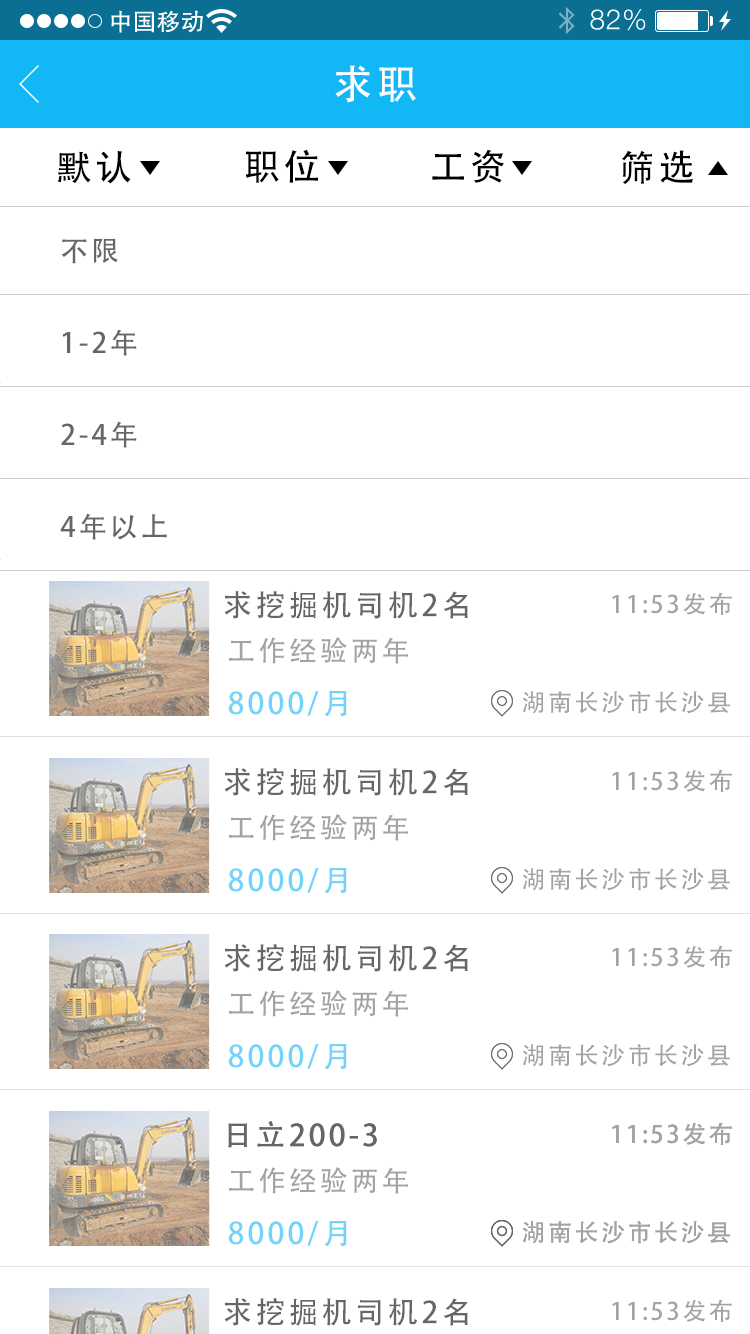
<style>
.page{position:relative;width:750px;height:1334px;background:#ffffff}
.page>*{position:absolute;margin:0}
.t1{font:40px "AdobeHeitiStd-Regular";letter-spacing:0.104em;color:#ffffff}
.t2{font:36px "AdobeHeitiStd-Regular";letter-spacing:0.104em;color:#000000}
.t3{font:28px "AdobeHeitiStd-Regular";letter-spacing:0.104em;color:#666666}
.t4{font:30px "AdobeHeitiStd-Regular";letter-spacing:0.104em;color:#666666}
.t5{font:24px "AdobeHeitiStd-Regular";letter-spacing:0.104em;color:#a3a3a3}
.t6{font:28px "AdobeHeitiStd-Regular";letter-spacing:0.104em;color:#a3a3a3}
.t7{font:30px "AdobeHeitiStd-Regular";letter-spacing:0.104em;color:#71d4fa}
</style>
<div class="page">
<p class="t1" style="left:335px;top:65px;width:81px;height:38px">求职</p>
<p class="t2" style="left:245px;top:149px;width:73px;height:34px">职位</p>
<p class="t2" style="left:432px;top:149px;width:72px;height:34px">工资</p>
<p class="t2" style="left:621px;top:150px;width:73px;height:35px">筛选</p>
<p class="t2" style="left:57px;top:151px;width:74px;height:33px">默认</p>
<p class="t3" style="left:61px;top:238px;width:57px;height:26px">不限</p>
<p class="t3" style="left:62px;top:329px;width:75px;height:27px">1-2年</p>
<p class="t3" style="left:61px;top:421px;width:76px;height:27px">2-4年</p>
<p class="t3" style="left:60px;top:513px;width:107px;height:27px">4年以上</p>
<p class="t4" style="left:224px;top:591px;width:244px;height:28px">求挖掘机司机2名</p>
<p class="t5" style="left:612px;top:592px;width:120px;height:23px">11:53发布</p>
<p class="t6" style="left:229px;top:637px;width:179px;height:27px">工作经验两年</p>
<p class="t7" style="left:228px;top:691px;width:119px;height:26px">8000/月</p>
<p class="t5" style="left:523px;top:691px;width:207px;height:23px">湖南长沙市长沙县</p>
<p class="t4" style="left:224px;top:768px;width:244px;height:28px">求挖掘机司机2名</p>
<p class="t5" style="left:612px;top:769px;width:120px;height:23px">11:53发布</p>
<p class="t6" style="left:229px;top:814px;width:179px;height:27px">工作经验两年</p>
<p class="t7" style="left:228px;top:868px;width:119px;height:26px">8000/月</p>
<p class="t5" style="left:523px;top:868px;width:207px;height:23px">湖南长沙市长沙县</p>
<p class="t4" style="left:224px;top:944px;width:244px;height:28px">求挖掘机司机2名</p>
<p class="t5" style="left:612px;top:945px;width:120px;height:23px">11:53发布</p>
<p class="t6" style="left:229px;top:990px;width:179px;height:27px">工作经验两年</p>
<p class="t7" style="left:228px;top:1044px;width:119px;height:26px">8000/月</p>
<p class="t5" style="left:523px;top:1044px;width:207px;height:23px">湖南长沙市长沙县</p>
<p class="t4" style="left:228px;top:1121px;width:149px;height:27px">日立200-3</p>
<p class="t4" style="left:228px;top:1121px;width:149px;height:27px">日立200-3</p>
<p class="t5" style="left:612px;top:1122px;width:120px;height:23px">11:53发布</p>
<p class="t5" style="left:612px;top:1122px;width:120px;height:23px">11:53发布</p>
<p class="t6" style="left:229px;top:1167px;width:179px;height:27px">工作经验两年</p>
<p class="t7" style="left:228px;top:1221px;width:119px;height:26px">8000/月</p>
<p class="t5" style="left:523px;top:1221px;width:207px;height:23px">湖南长沙市长沙县</p>
<p class="t5" style="left:523px;top:1221px;width:207px;height:23px">湖南长沙市长沙县</p>
<p class="t4" style="left:224px;top:1298px;width:244px;height:28px">求挖掘机司机2名</p>
<p class="t5" style="left:612px;top:1299px;width:120px;height:23px">11:53发布</p>
</div>
